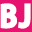
<style>
.page{position:relative;width:32px;height:32px;background:#ffffff}
.page>*{position:absolute;margin:0}
.t1{font:48.3px "was@peenang";color:#ffffff}
</style>
<div class="page">
<p class="t1" style="left:0px;top:3px;width:31px;height:26px">BJ</p>
</div>
